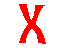
<style>
.page{position:relative;width:64px;height:48px;background:#ffffff}
.page>*{position:absolute;margin:0}
.t1{font:48px "ARCHRISTY";color:#ff0000}
</style>
<div class="page">
<p class="t1" style="left:19px;top:4px;width:27px;height:40px">X</p>
</div>
